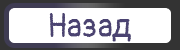
<style>
.page{position:relative;width:180px;height:50px;background:#ffffff}
.page>*{position:absolute;margin:0}
.t1{font:32px "Pangolin-Regular";color:#4b4371}
</style>
<div class="page">
<p class="t1" style="left:49px;top:13px;width:82px;height:29px">Назад</p>
</div>
